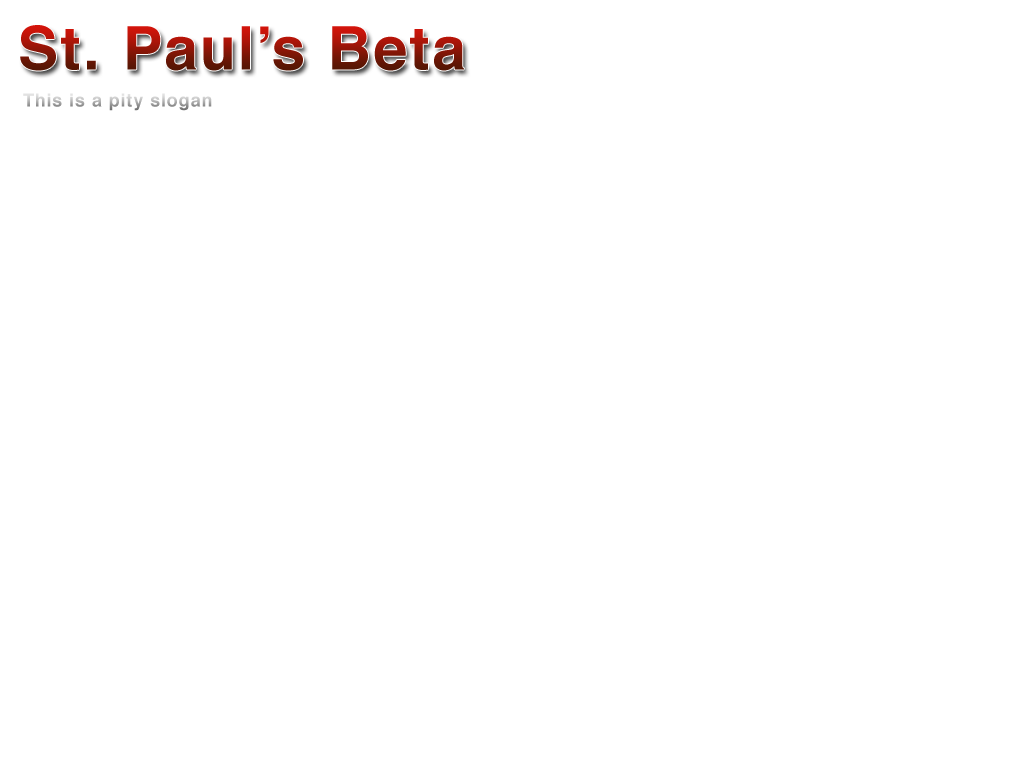
<style>
.page{position:relative;width:1024px;height:768px;background:#ffffff}
.page>*{position:absolute;margin:0}
.t1{font:60px "Helvetica-Bold";letter-spacing:0.05em}
.t2{font:18px "Helvetica-Bold";letter-spacing:0.05em}
</style>
<div class="page">
<p class="t1" style="left:20px;top:25px;width:444px;height:46px">St. Paul’s Beta</p>
<p class="t2" style="left:23px;top:93px;width:189px;height:18px">This is a pity slogan</p>
</div>
